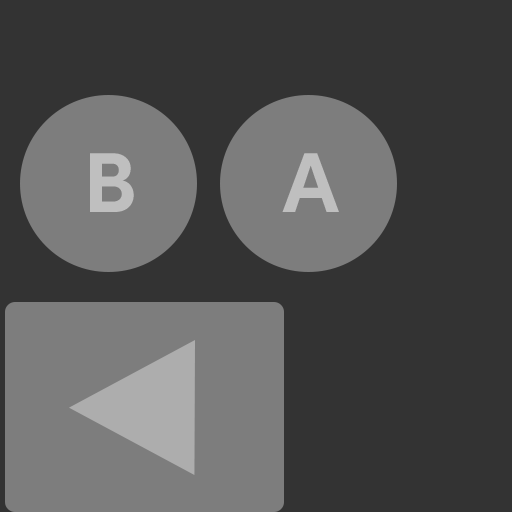
<style>
.page{position:relative;width:512px;height:512px;background:#333333}
.page>*{position:absolute;margin:0}
.t1{font:85.3px "SofiaPro-Bold";letter-spacing:0.03em;color:#bfbfbf;text-transform:uppercase}
</style>
<div class="page">
<p class="t1" style="left:90px;top:153px;width:44px;height:59px">B</p>
<p class="t1" style="left:282px;top:153px;width:57px;height:59px">A</p>
</div>
